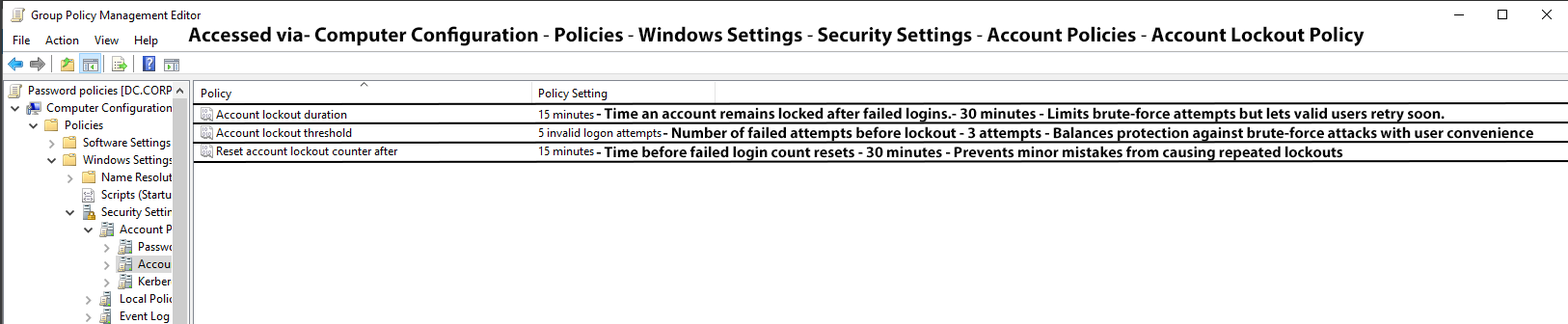
<style>
.page{position:relative;width:1568px;height:324px;background:#ffffff}
.page>*{position:absolute;margin:0}
.t1{font:20.6px "MyriadPro-Bold";color:#030303}
.t2{font:20.6px "MyriadPro-Regular";color:#030303}
.t3{font:15.4px "MyriadPro-Bold";color:#030303}
</style>
<div class="page">
<p class="t1" style="left:188px;top:26px;width:1177px;height:20px">Accessed via- Computer Configuration <span class="t2">- </span>Policies <span class="t2">-</span> Windows Settings <span class="t2">-</span> Security Settings <span class="t2">-</span> Account Policies <span class="t2">-</span> Account Lockout Policy</p>
<p class="t3" style="left:596px;top:107px;width:849px;height:15px">- Time an account remains locked after failed logins.- 30 minutes - Limits brute-force attempts but lets valid users retry soon.</p>
<p class="t3" style="left:663px;top:126px;width:870px;height:16px">- Number of failed attempts before lockout - 3 attempts - Balances protection against brute-force attacks with user convenience</p>
<p class="t3" style="left:596px;top:146px;width:747px;height:15px">- Time before failed login count resets - 30 minutes - Prevents minor mistakes from causing repeated lockouts</p>
</div>
